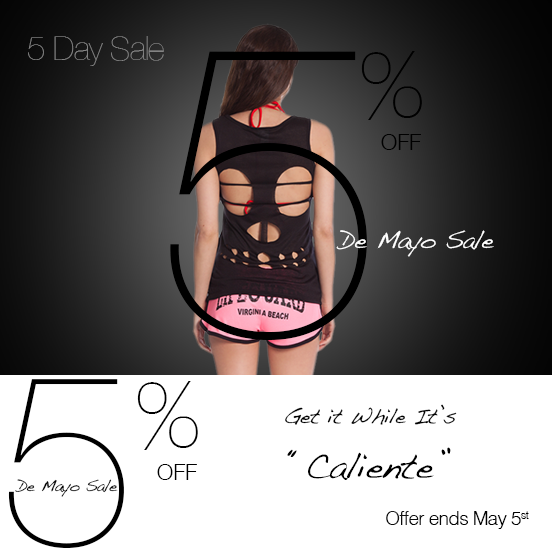
<style>
.page{position:relative;width:552px;height:552px;background:#ffffff}
.page>*{position:absolute;margin:0}
.t1{font:33.3px "HelveticaNeue-UltraLight";letter-spacing:-0.025em;color:#838383}
.t2{font:416.7px "HelveticaNeue-UltraLight";letter-spacing:-0.025em;color:#000000}
.t3{font:92.9px "HelveticaNeue-UltraLight";letter-spacing:-0.025em;color:#000000}
.t4{font:22.3px "Helvetica-Light";letter-spacing:-0.025em;color:#000000}
.t5{font:25px "Handwriting-Dakota";letter-spacing:-0.025em;color:#ffffff}
.t6{font:244.5px "HelveticaNeue-UltraLight";letter-spacing:-0.025em;color:#000000}
.t7{font:20.8px "Handwriting-Dakota";letter-spacing:-0.025em;color:#000000}
.t8{font:36.1px "Handwriting-Dakota";letter-spacing:-0.025em;color:#000000}
.t9{font:16.2px "Handwriting-Dakota";letter-spacing:-0.025em;color:#000000}
.t10{font:18.5px "Helvetica-Light";letter-spacing:-0.025em;color:#000000}
</style>
<div class="page">
<p class="t1" style="left:28px;top:36px;width:136px;height:30px">5 Day Sale</p>
<p class="t2" style="left:170px;top:51px;width:197px;height:289px">5</p>
<p class="t3" style="left:361px;top:51px;width:61px;height:69px">%</p>
<p class="t4" style="left:381px;top:134px;width:40px;height:16px">OFF</p>
<p class="t5" style="left:336px;top:230px;width:158px;height:27px">De Mayo Sale</p>
<p class="t6" style="left:8px;top:379px;width:116px;height:169px">5</p>
<p class="t3" style="left:137px;top:381px;width:61px;height:69px">%</p>
<p class="t7" style="left:285px;top:404px;width:172px;height:21px">Get it While It’s</p>
<p class="t8" style="left:287px;top:447px;width:164px;height:33px">“Caliente”</p>
<p class="t4" style="left:157px;top:464px;width:40px;height:16px">OFF</p>
<p class="t9" style="left:15px;top:479px;width:103px;height:18px">De Mayo Sale</p>
<p class="t10" style="left:386px;top:511px;width:143px;height:18px">Offer ends May 5st</p>
</div>
